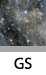
<style>
.page{position:relative;width:46px;height:75px;background:#ffffff}
.page>*{position:absolute;margin:0}
.t1{font:16px "MyriadPro-Regular";color:#000000}
</style>
<div class="page">
<p class="t1" style="left:14px;top:57px;width:18px;height:12px">GS</p>
</div>
